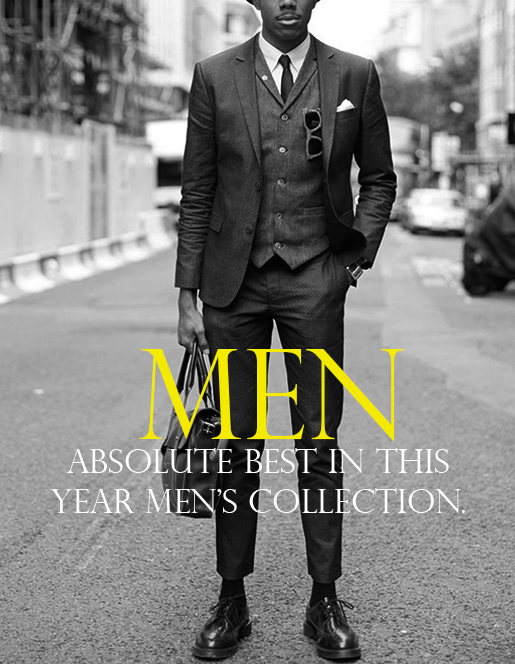
<style>
.page{position:relative;width:515px;height:664px}
.page>*{position:absolute;margin:0}
.t1{font:125px "PerpetuaTitlingMT-Light";letter-spacing:-0.005em;color:#f3ea00}
.t2{font:33.3px "PerpetuaTitlingMT-Light";letter-spacing:-0.005em;color:#ffffff}
</style>
<div class="page">
<p class="t1" style="left:139px;top:349px;width:265px;height:92px">men</p>
<p class="t2" style="left:50px;top:448px;width:415px;height:65px;text-align:center">absolute best in this year men’s collection.</p>
</div>
